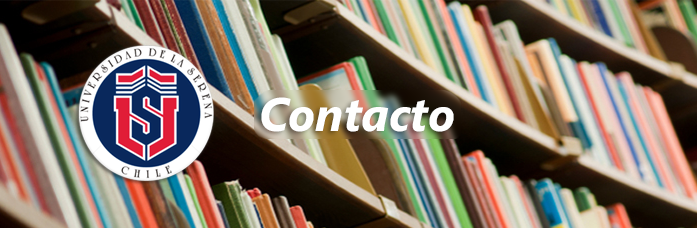
<style>
.page{position:relative;width:697px;height:228px}
.page>*{position:absolute;margin:0}
.t1{font:47px "SegoeUI-BoldItalic";color:#ffffff}
</style>
<div class="page">
<p class="t1" style="left:261px;top:97px;width:193px;height:35px">Contacto</p>
</div>
